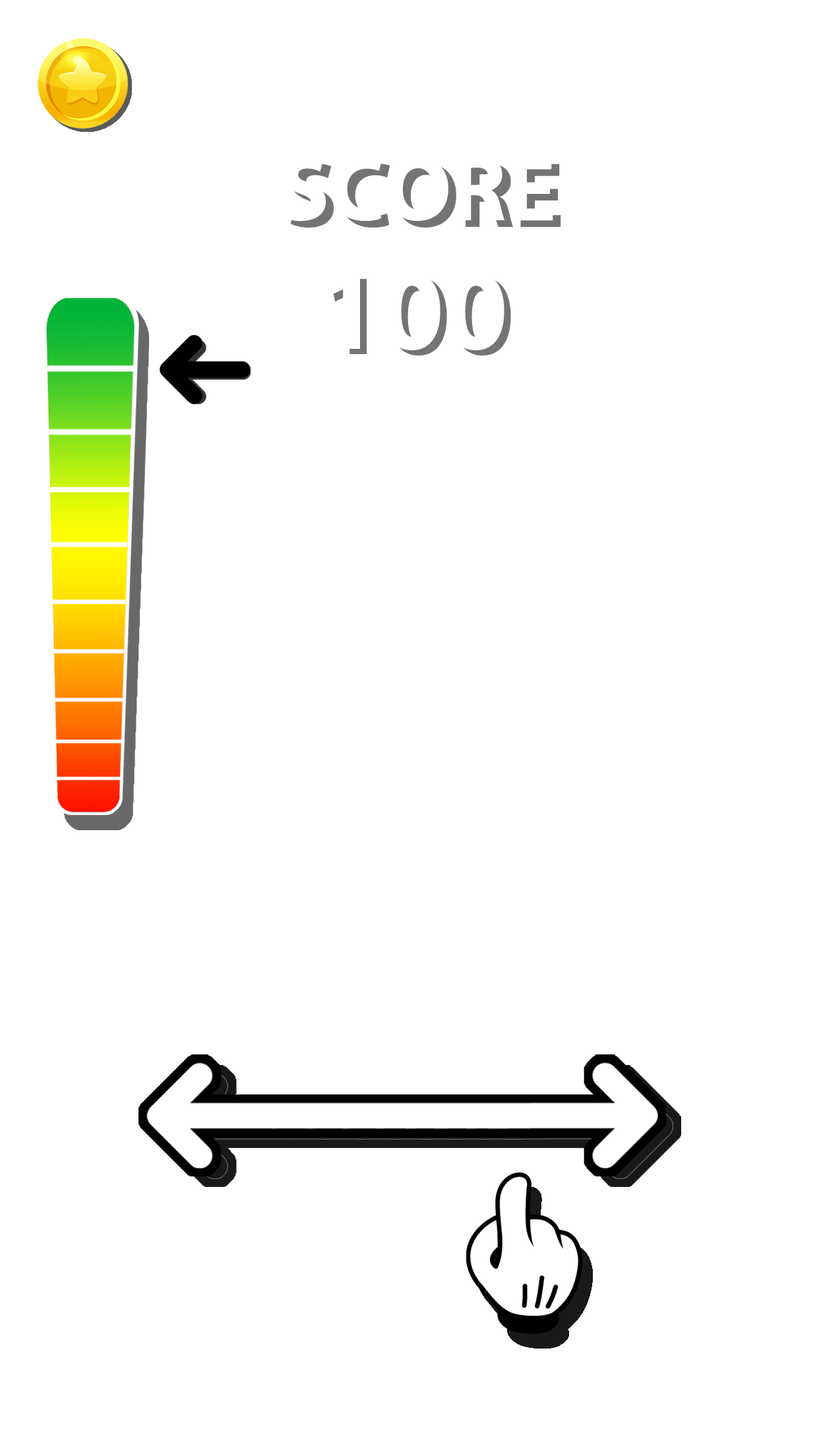
<style>
.page{position:relative;width:819px;height:1456px;background:#ffffff}
.page>*{position:absolute;margin:0}
.t1{font:93.1px "MyriadPro-Bold";color:#ffffff}
.t2{font:93.1px "MyriadPro-Bold"}
.t3{font:115.4px "MyriadPro-Bold";color:#ffffff}
.t4{font:115.4px "MyriadPro-Bold"}
</style>
<div class="page">
<p class="t1" style="left:282px;top:156px;width:271px;height:66px">SCORE</p>
<p class="t2" style="left:290px;top:163px;width:271px;height:65px">SCORE</p>
<p class="t3" style="left:325px;top:272px;width:179px;height:79px">100</p>
<p class="t4" style="left:332px;top:277px;width:179px;height:79px">100</p>
</div>
